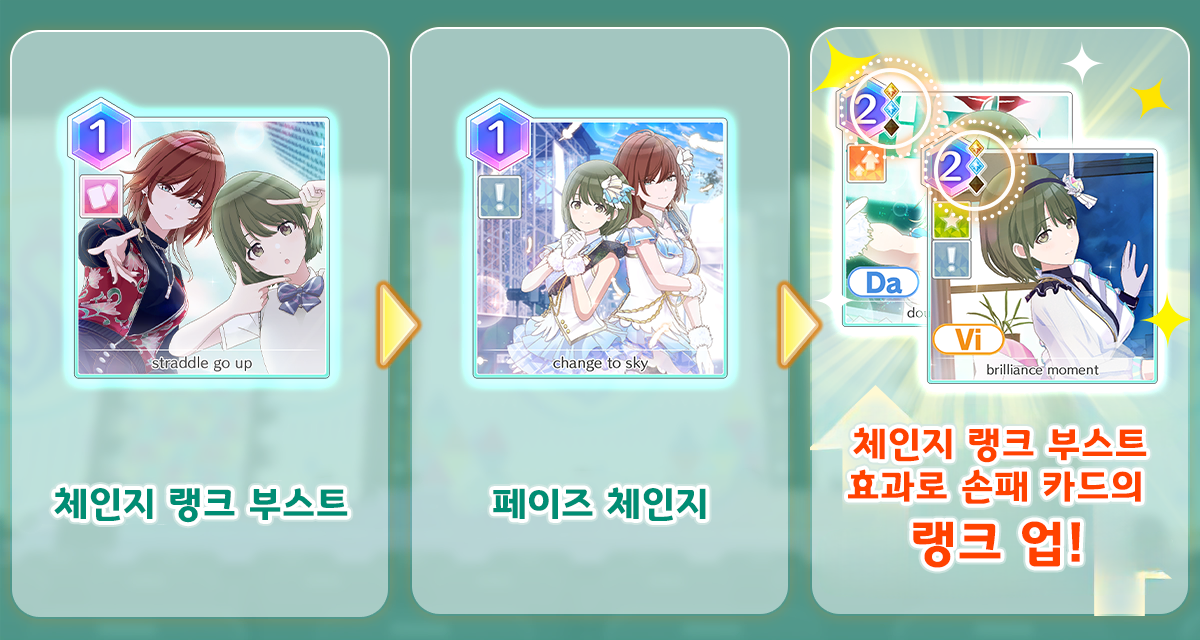
<style>
.page{position:relative;width:1200px;height:640px}
.page>*{position:absolute;margin:0}
.t1{font:37.3px/42.7px "GyeonggiTitleB";letter-spacing:0.05em;color:#ff4200}
.t2{font:37.3px "GyeonggiTitleB";letter-spacing:0.05em;color:#008d74}
.t3{font:50.7px "GyeonggiTitleB";letter-spacing:0.05em;color:#ff4200}
</style>
<div class="page">
<p class="t1" style="left:848px;top:427px;width:299px;height:77px;text-align:center">체인지 랭크 부스트<br>효과로 손패 카드의</p>
<p class="t2" style="left:54px;top:487px;width:294px;height:36px">체인지 랭크 부스트</p>
<p class="t2" style="left:493px;top:487px;width:213px;height:34px">페이즈 체인지</p>
<p class="t3" style="left:913px;top:521px;width:167px;height:47px">랭크 업!</p>
</div>
